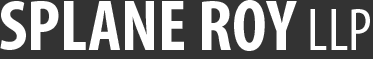
<style>
.page{position:relative;width:373px;height:59px;background:#333333}
.page>*{position:absolute;margin:0}
.t1{font:72px "MyriadPro-BoldCond";color:#ffffff}
.t2{font:60px "MyriadPro-Cond";color:#ffffff}
</style>
<div class="page">
<p class="t1" style="left:0px;top:0px;width:370px;height:51px">SPLANE ROY <span class="t2">LLP</span></p>
</div>
